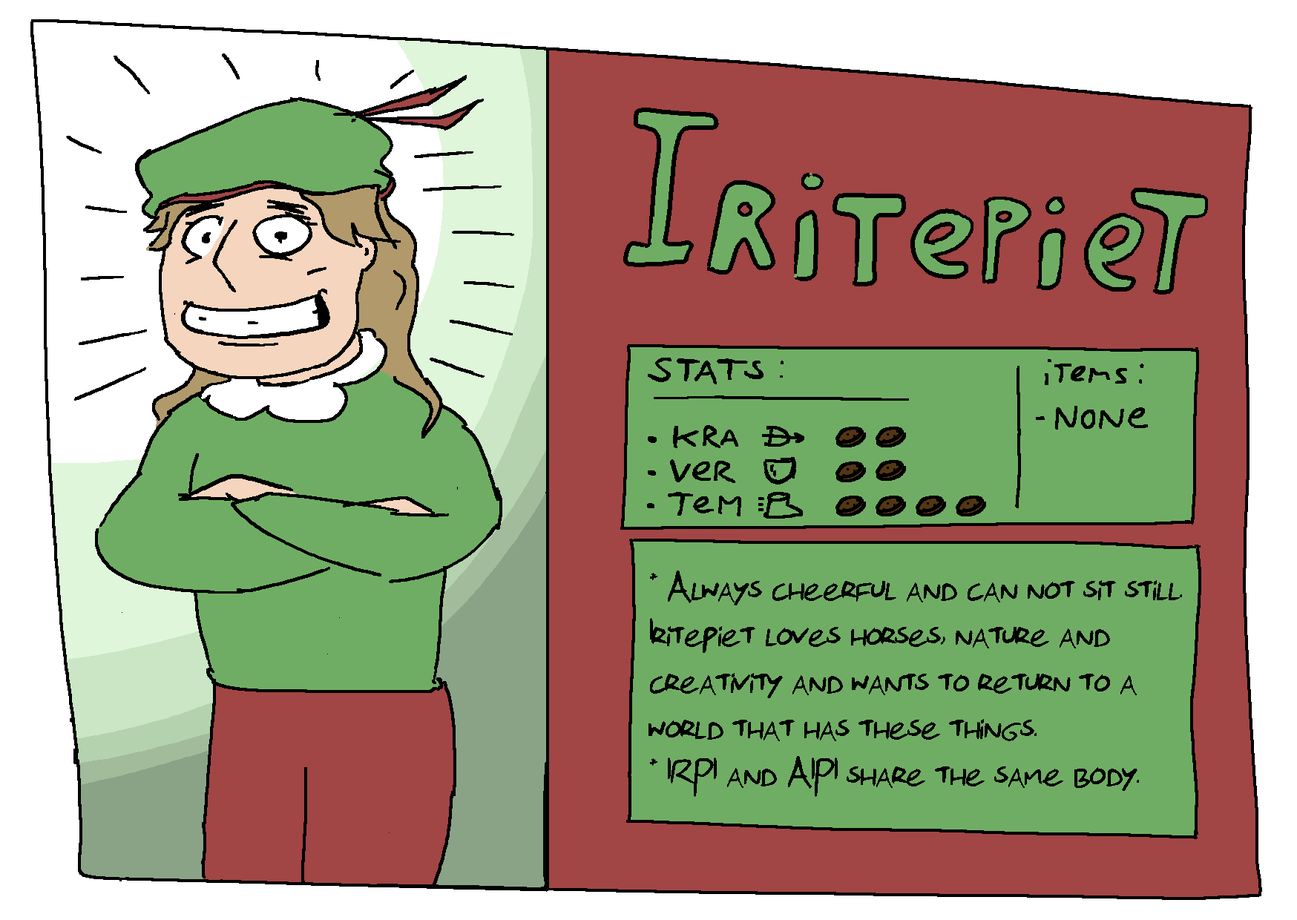
<style>
.page{position:relative;width:1297px;height:920px;background:#70ad64}
.page>*{position:absolute;margin:0}
.t1{font:40.2px/46.4px "Florisfont2-Regular";color:#000000}
</style>
<div class="page">
<p class="t1" style="left:648px;top:570px;width:534px;height:227px">* Always cheerful and can not sit still.<br>Iritepiet loves horses, nature and <br>creativity and wants to return to a <br>world that has these things.<br>* IRPI and AIPI share the sam.e body.</p>
</div>
